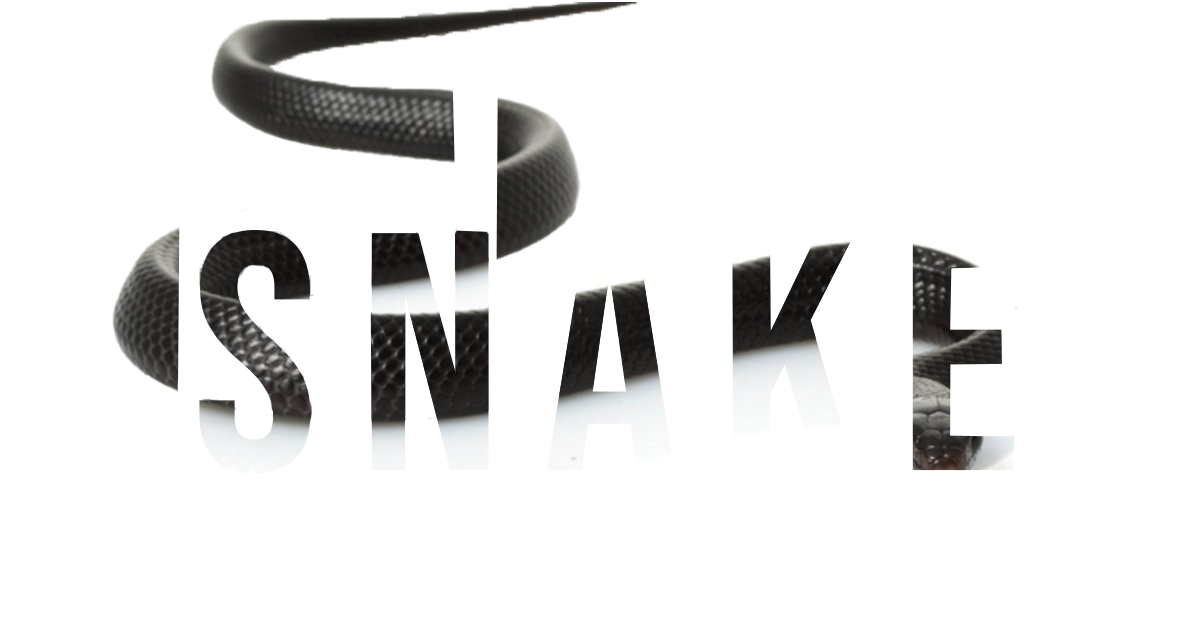
<style>
.page{position:relative;width:1200px;height:627px;background:#ffffff}
.page>*{position:absolute;margin:0}
.t1{font:338px "BebasNeue-Regular";letter-spacing:0.12em}
</style>
<div class="page">
<p class="t1" style="left:199px;top:230px;width:816px;height:244px">snake</p>
</div>
